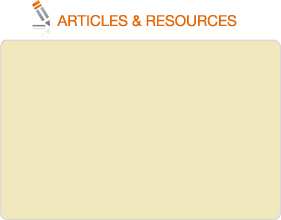
<style>
.page{position:relative;width:281px;height:220px;background:#f1e7bd}
.page>*{position:absolute;margin:0}
.t1{font:15px "HelveticaNeueLTStd-Roman";color:#e36704}
</style>
<div class="page">
<p class="t1" style="left:57px;top:15px;width:180px;height:12px">ARTICLES &amp; RESOURCES</p>
</div>
